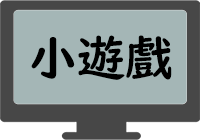
<style>
.page{position:relative;width:200px;height:140px;background:#a4b6b6}
.page>*{position:absolute;margin:0}
.t1{font:48px "UDDigiKyokashoN-B";color:#000000}
</style>
<div class="page">
<p class="t1" style="left:31px;top:35px;width:141px;height:45px">小遊戲</p>
</div>
